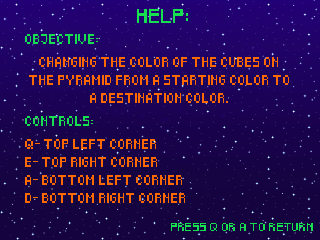
<style>
.page{position:relative;width:320px;height:240px}
.page>*{position:absolute;margin:0}
.t1{font:12px "Pixeled";letter-spacing:0.014em;color:#16e04f}
.t2{font:8px "Pixeled";color:#16e04f}
.t3{font:8px/18px "Pixeled";color:#ff6a00}
.t4{font:7px "Pixeled";letter-spacing:0.04em;color:#16e04f}
</style>
<div class="page">
<p class="t1" style="left:137px;top:9px;width:51px;height:14px">HELP:</p>
<p class="t2" style="left:25px;top:34px;width:73px;height:10px">OBJECTIVE:</p>
<p class="t3" style="left:29px;top:57px;width:260px;height:46px;text-align:center">CHANGING THE COLOR OF THE CUBES ON THE PYRAMID FROM A STARTING COLOR TO A DESTINATION COLOR.</p>
<p class="t2" style="left:25px;top:116px;width:68px;height:10px">CONTROLS:</p>
<p class="t3" style="left:25px;top:139px;width:160px;height:64px">Q- TOP LEFT CORNER<br>E- TOP RIGHT CORNER<br>A- BOTTOM LEFT CORNER<br>D- BOTTOM RIGHT CORNER<br><br>A - LOWER CORNER LEFTv<br>A - LOWER CORNER LEFT<br>A - LOWER CORNER LEFT</p>
<p class="t4" style="left:171px;top:223px;width:142px;height:8px">PRESS Q OR A TO RETURN</p>
</div>
